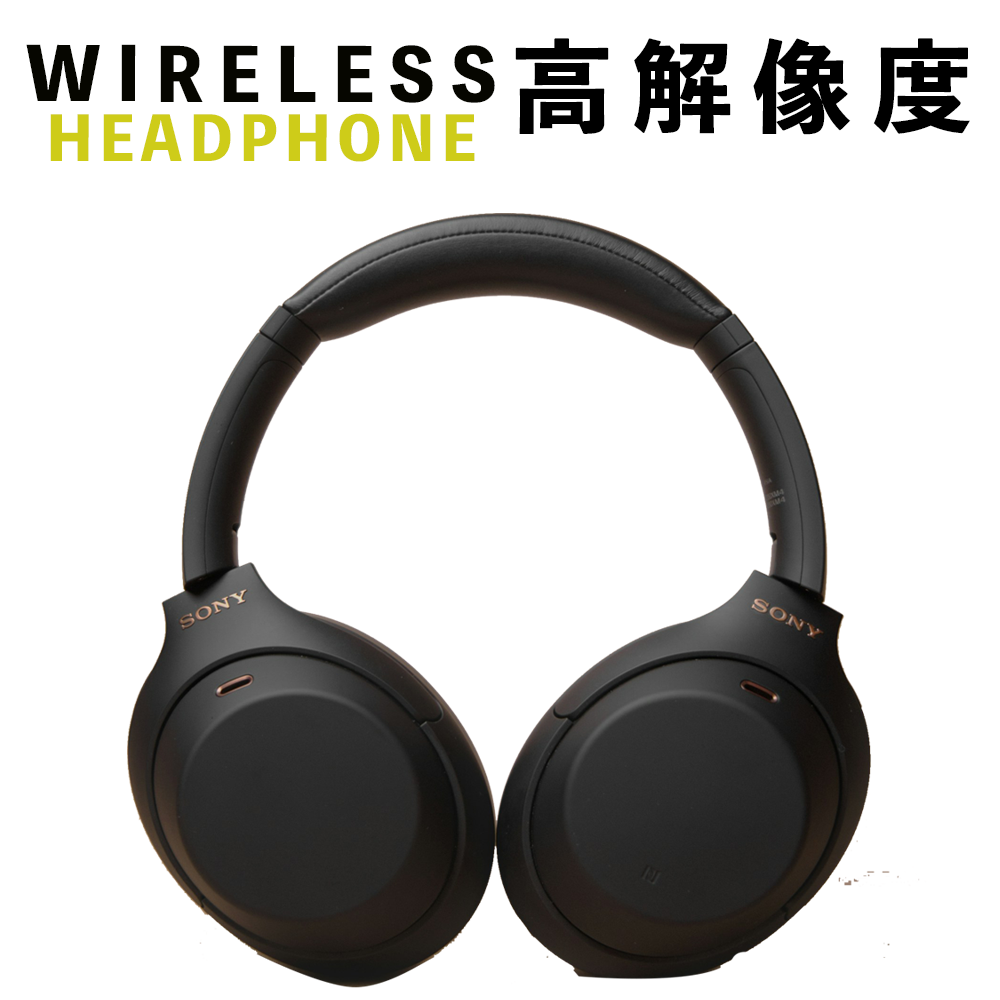
<style>
.page{position:relative;width:1000px;height:1000px;background:#ffffff}
.page>*{position:absolute;margin:0}
.t1{font:100px "ToppanBunkyuMidashiGothicStdN-ExtraBold";letter-spacing:0.2em;color:#000000}
.t2{font:72px "ToppanBunkyuMidashiGothicStdN-ExtraBold";letter-spacing:0.2em;color:#060600}
.t3{font:60px "ToppanBunkyuMidashiGothicStdN-ExtraBold";letter-spacing:0.1em;color:#cecc19}
</style>
<div class="page">
<p class="t1" style="left:515px;top:38px;width:455px;height:97px">高解像度</p>
<p class="t2" style="left:26px;top:44px;width:469px;height:118px">ＷIRELESS  <span class="t3">HEADPHON</span><span class="t3">E</span></p>
</div>
